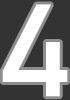
<style>
.page{position:relative;width:70px;height:100px;background:#333333}
.page>*{position:absolute;margin:0}
.t1{font:128.8px "Bahnschrift";color:#ffffff;scale:1.09 1}
</style>
<div class="page">
<p class="t1" style="left:2px;top:4px;width:66px;height:93px">4</p>
</div>
